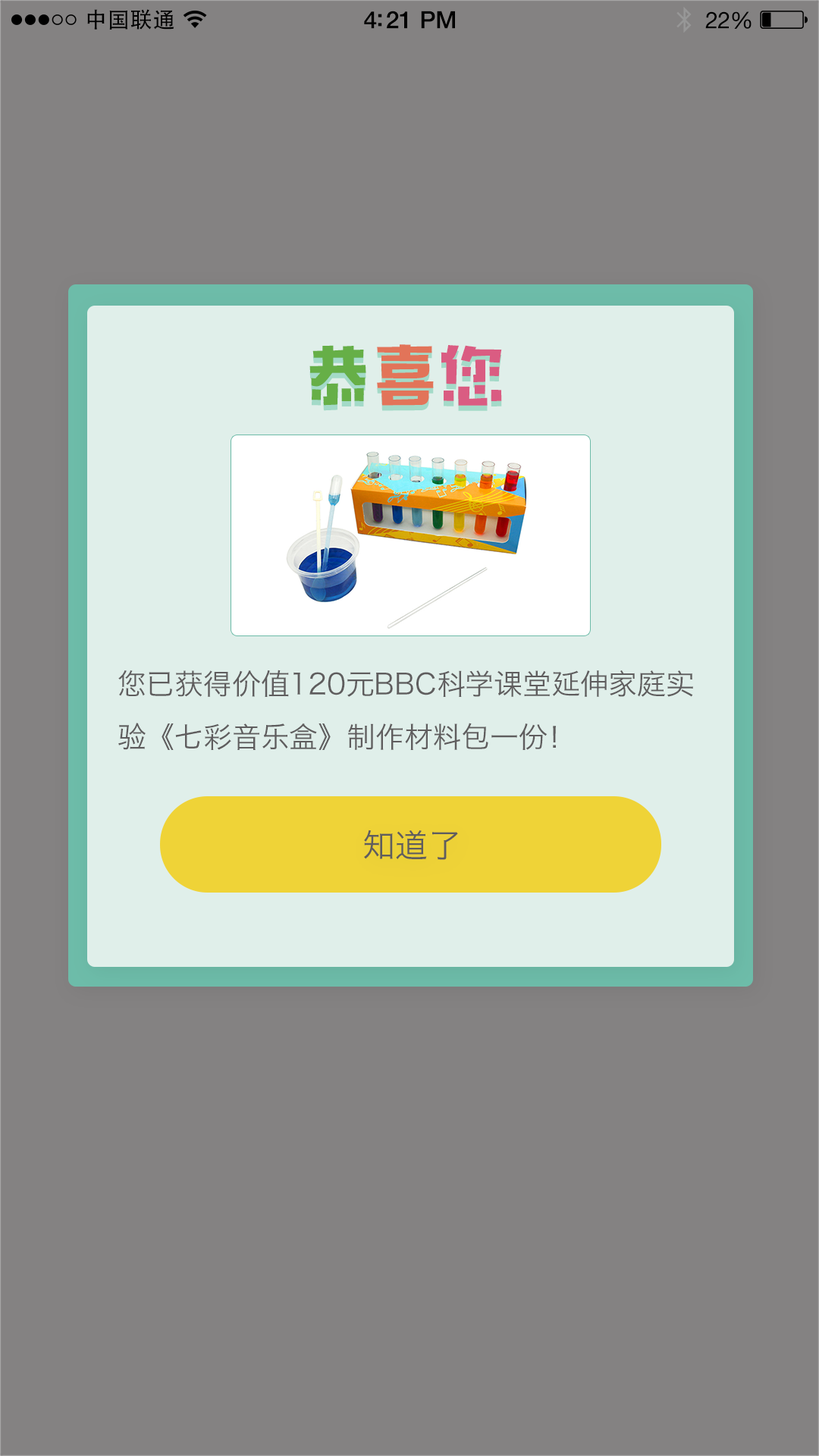
<style>
.page{position:relative;width:819px;height:1456px;background:#848282}
.page>*{position:absolute;margin:0}
.t1{font:22px "AdobeHeitiStd-Regular";letter-spacing:0.02em;color:#000000}
.t2{font:23.9px "HelveticaNeue-Medium";letter-spacing:-0.02em;color:#000000}
.t3{font:22.9px "HelveticaNeue";letter-spacing:-0.02em;color:#000000}
.t4{font:67.4px "MFTongXin_Noncommercial-Regular"}
.t5{font:67.4px "MFTongXin_Noncommercial-Regular";color:#66af47}
.t6{font:67.4px "MFTongXin_Noncommercial-Regular";color:#e27459}
.t7{font:67.4px "MFTongXin_Noncommercial-Regular";color:#da5c82}
.t8{font:28.8px/52.9px "HiraginoSansGB-W3";letter-spacing:-0.006em;color:#5f5d5e}
.t9{font:32.7px "HiraginoSansGB-W3";color:#5f5d5e}
</style>
<div class="page">
<p class="t1" style="left:87px;top:9px;width:87px;height:21px">中国联通</p>
<p class="t2" style="left:364px;top:11px;width:91px;height:18px">4:21 PM</p>
<p class="t3" style="left:705px;top:11px;width:46px;height:18px">22%</p>
<p class="t4" style="left:309px;top:350px;width:193px;height:61px">恭喜您</p>
<p class="t5" style="left:309px;top:344px;width:193px;height:62px">恭<span class="t6">喜</span><span class="t7">您</span></p>
<p class="t8" style="left:118px;top:670px;width:575px;height:80px">您已获得价值120元BBC科学课堂延伸家庭实<br>验《七彩音乐盒》制作材料包一份！</p>
<p class="t9" style="left:364px;top:830px;width:94px;height:30px">知道了</p>
</div>
